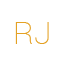
<style>
.page{position:relative;width:64px;height:64px;background:#ffffff}
.page>*{position:absolute;margin:0}
.t1{font:32px "Roboto-Thin";color:#e4a124}
</style>
<div class="page">
<p class="t1" style="left:15px;top:22px;width:34px;height:22px">RJ</p>
</div>
